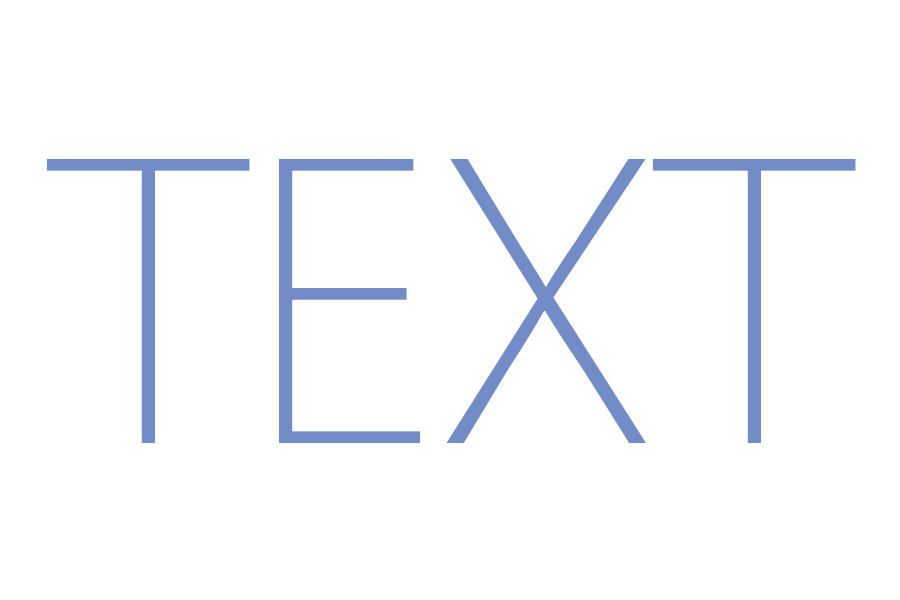
<style>
.page{position:relative;width:900px;height:600px;background:#ffffff}
.page>*{position:absolute;margin:0}
.t1{font:375px "KozGoPr6N-ExtraLight";color:#718cc7}
</style>
<div class="page">
<p class="t1" style="left:46px;top:158px;width:810px;height:286px">TEXT</p>
</div>
